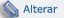
<style>
.page{position:relative;width:64px;height:18px;background:#eff0f1}
.page>*{position:absolute;margin:0}
.t1{font:10px "Verdana";color:#336ca1}
</style>
<div class="page">
<p class="t1" style="left:23px;top:5px;width:35px;height:8px">Alterar</p>
</div>
